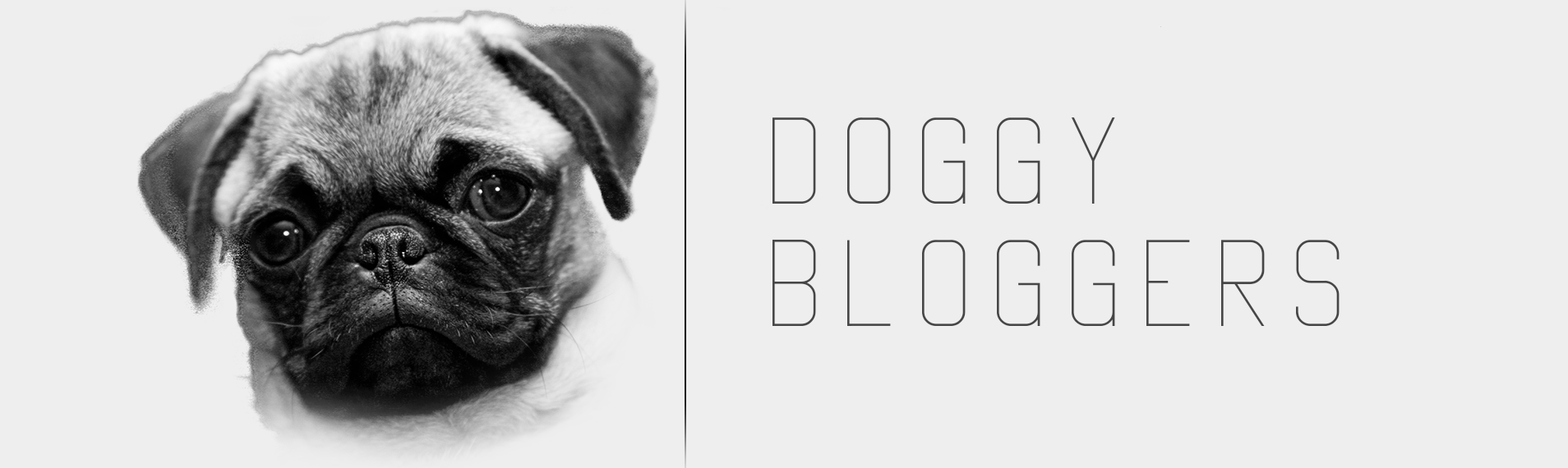
<style>
.page{position:relative;width:1568px;height:468px;background:#eeeeee}
.page>*{position:absolute;margin:0}
.t1{font:123.3px/40.9px "Vanadine-Regular";letter-spacing:0.12em;color:#464646}
</style>
<div class="page">
<p class="t1" style="left:772px;top:26px;width:568px;height:300px">Doggy<br><br><br>Bloggers</p>
</div>
